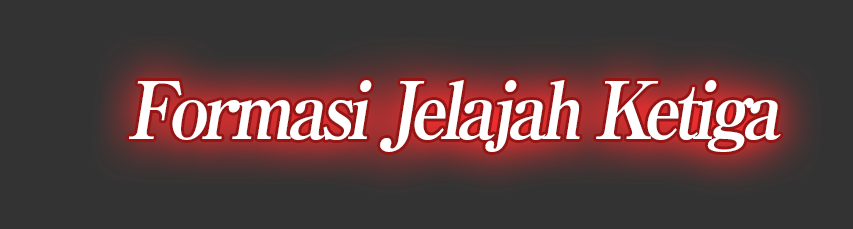
<style>
.page{position:relative;width:853px;height:229px;background:#333333}
.page>*{position:absolute;margin:0}
.t1{font:80px "RyuminPro-ExBold";letter-spacing:-0.08em;color:#ffffff;font-style:italic;scale:0.9 1}
</style>
<div class="page">
<p class="t1" style="left:129px;top:80px;width:652px;height:72px">Formasi Jelajah Ketiga</p>
</div>
